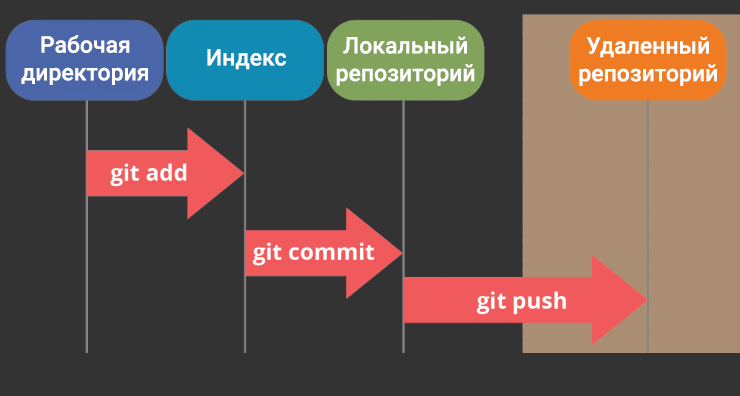
<style>
.page{position:relative;width:740px;height:396px;background:#333333}
.page>*{position:absolute;margin:0}
.t1{font:23px "Roboto-Medium";color:#ffffff}
</style>
<div class="page">
<p class="t1" style="left:21px;top:35px;width:127px;height:50px;text-align:center">Рабочая<br>директория</p>
<p class="t1" style="left:336px;top:36px;width:139px;height:50px;text-align:center">Локальный<br>репозиторий</p>
<p class="t1" style="left:579px;top:36px;width:138px;height:50px;text-align:center">Удаленный<br>репозиторий</p>
<p class="t1" style="left:207px;top:49px;width:79px;height:21px">Индекс</p>
</div>
